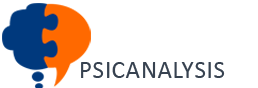
<style>
.page{position:relative;width:258px;height:88px;background:#ffffff}
.page>*{position:absolute;margin:0}
.t1{font:25px "Calibri";letter-spacing:0.025em;color:#374250}
</style>
<div class="page">
<p class="t1" style="left:81px;top:62px;width:144px;height:16px">PSICANALYSIS</p>
</div>
